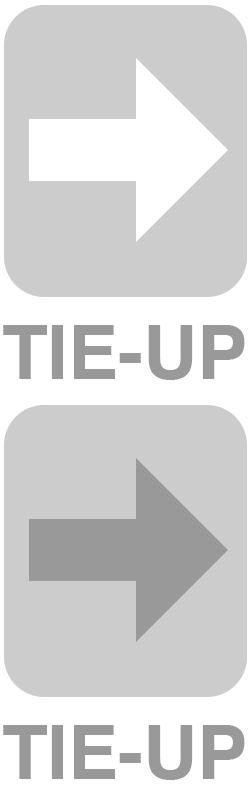
<style>
.page{position:relative;width:250px;height:800px;background:#cccccc}
.page>*{position:absolute;margin:0}
.t1{font:75px "Helvetica-Bold";color:#999999}
</style>
<div class="page">
<p class="t1" style="left:3px;top:325px;width:242px;height:55px">TIE-UP</p>
<p class="t1" style="left:3px;top:725px;width:242px;height:55px">TIE-UP</p>
</div>
